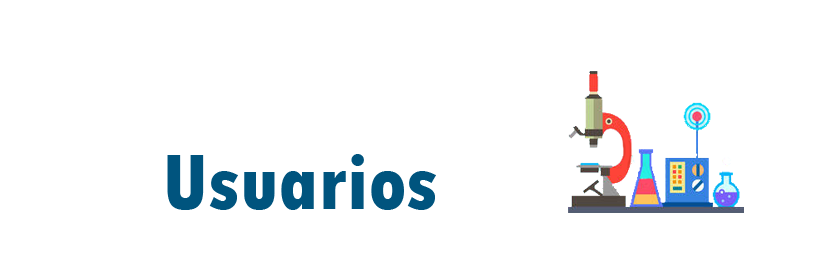
<style>
.page{position:relative;width:832px;height:256px;background:#ffffff}
.page>*{position:absolute;margin:0}
.t1{font:83.3px "TwCenMT-CondensedExtraBold";color:#00547e}
</style>
<div class="page">
<p class="t1" style="left:167px;top:154px;width:269px;height:56px">Usuarios</p>
</div>
